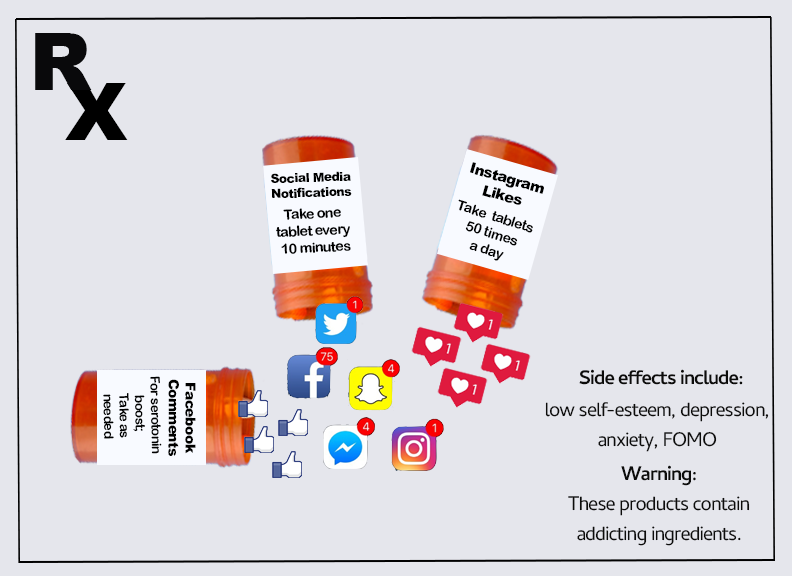
<style>
.page{position:relative;width:792px;height:576px;background:#e5e6ec}
.page>*{position:absolute;margin:0}
.t1{font:80px "Arial-Black";letter-spacing:-0.04em;color:#09090b}
.t2{font:80px "Arial-Black";letter-spacing:-0.04em;color:#000000}
.t3{font:12.6px "Arial-Black";letter-spacing:-0.04em;color:#000000}
.t4{font:14.8px "Arial-Black";letter-spacing:-0.04em;color:#000000}
.t5{font:14.2px "ArialRoundedMTBold";letter-spacing:-0.04em;color:#000000}
.t6{font:13.2px "ArialRoundedMTBold";letter-spacing:-0.04em;color:#000000}
.t7{font:25px "CambayDevanagari-Bold";letter-spacing:-0.04em;color:#0c0c0b}
.t8{font:14px "Arial-Black";letter-spacing:-0.04em;color:#000000}
.t9{font:25px "CambayDevanagari-Regular";letter-spacing:-0.04em;color:#0c0c0b}
</style>
<div class="page">
<p class="t1" style="left:35px;top:33px;width:57px;height:57px">R</p>
<p class="t2" style="left:65px;top:83px;width:63px;height:57px">X</p>
<p class="t3" style="left:271px;top:171px;width:81px;height:27px;text-align:center;rotate:-2deg">Social Media<br>Notifications</p>
<p class="t4" style="left:470px;top:162px;width:74px;height:43px;text-align:center;rotate:16deg">Instagram<br>Likes</p>
<p class="t5" style="left:276px;top:208px;width:75px;height:46px;text-align:center;rotate:-3deg">Take one <br>tablet every <br>10 minutes</p>
<p class="t5" style="left:458px;top:199px;width:75px;height:62px;text-align:center;rotate:18deg">Take  tablets <br>50 times<br>a day</p>
<p class="t6" style="left:103px;top:376px;width:59px;height:78px;text-align:center;rotate:89deg">For serotonin<br>boost; <br>Take as<br>needed</p>
<p class="t7" style="left:579px;top:369px;width:164px;height:16px">Side effects include:</p>
<p class="t8" style="left:168px;top:379px;width:28px;height:77px;text-align:center;rotate:90deg">Facebook<br>Comments</p>
<p class="t9" style="left:545px;top:402px;width:224px;height:50px;text-align:center">low self-esteem, depression, anxiety, FOMO</p>
<p class="t7" style="left:621px;top:465px;width:75px;height:21px">Warning:</p>
<p class="t9" style="left:568px;top:496px;width:182px;height:50px;text-align:center">These products contain addicting ingredients.</p>
</div>
